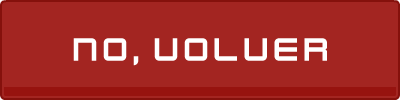
<style>
.page{position:relative;width:400px;height:100px;background:#a32521}
.page>*{position:absolute;margin:0}
.t1{font:36px "KenVector-Future";color:#ffffff}
</style>
<div class="page">
<p class="t1" style="left:73px;top:38px;width:254px;height:28px">no, volver</p>
</div>
